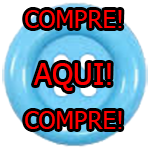
<style>
.page{position:relative;width:150px;height:149px;background:#ffffff}
.page>*{position:absolute;margin:0}
.t1{font:24px "Tahoma";color:#ff0000}
.t2{font:30px "Tahoma";color:#ff0000}
</style>
<div class="page">
<p class="t1" style="left:25px;top:10px;width:97px;height:18px">COMPRE!</p>
<p class="t2" style="left:34px;top:63px;width:77px;height:28px">AQUI!</p>
<p class="t1" style="left:25px;top:111px;width:97px;height:18px">COMPRE!</p>
</div>
